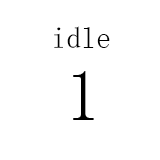
<style>
.page{position:relative;width:160px;height:160px;background:#ffffff}
.page>*{position:absolute;margin:0}
.t1{font:30px "SimSun";color:#000000}
.t2{font:72px "SimSun";color:#000000}
</style>
<div class="page">
<p class="t1" style="left:54px;top:26px;width:56px;height:22px">idle</p>
<p class="t2" style="left:73px;top:71px;width:21px;height:49px">1</p>
</div>
